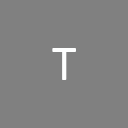
<style>
.page{position:relative;width:128px;height:128px;background:#808080}
.page>*{position:absolute;margin:0}
.t1{font:50px "Calibri";color:#feffff}
</style>
<div class="page">
<p class="t1" style="left:52px;top:48px;width:24px;height:32px">T</p>
</div>
